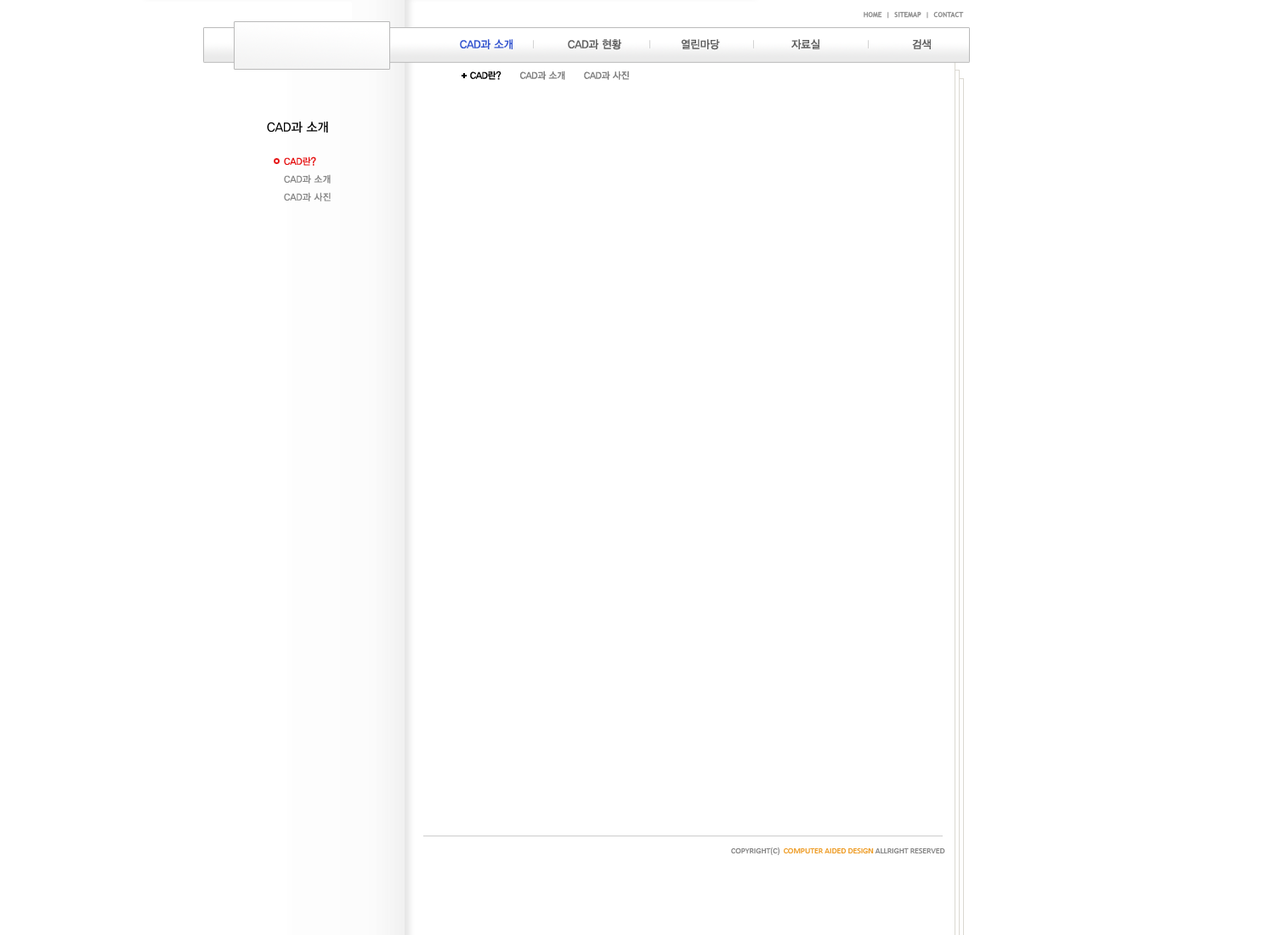
<style>
.page{position:relative;width:1275px;height:935px;background:#ffffff}
.page>*{position:absolute;margin:0}
.t1{font:6.8px "TrebuchetMS";color:#929292;text-transform:uppercase;font-weight:bold}
.t2{font:11.1px "YDIYGO130";color:#3455cf;text-transform:uppercase;scale:0.95 1}
.t3{font:11.1px "YDIYGO130";color:#606060;text-transform:uppercase;scale:0.95 1}
.t4{font:9.4px "YDIYGO130";color:#808080;text-transform:uppercase;scale:0.95 1}
.t5{font:9.4px "YDIYGO130";color:#000000;text-transform:uppercase;scale:0.95 1}
.t6{font:12.8px "YDIYGO130";color:#000000;text-transform:uppercase;scale:0.95 1}
.t7{font:9.4px/17.9px "YDIYGO130";color:#888888;text-transform:uppercase;font-weight:bold;scale:0.95 1}
.t8{font:9.4px/17.9px "YDIYGO130";color:#e50f0f;text-transform:uppercase;font-weight:bold;scale:0.95 1}
.t9{font:8.5px "Calibri";letter-spacing:-0.01em;color:#ee9d28;text-transform:uppercase}
.t10{font:8.5px "Calibri";letter-spacing:-0.01em;color:#868686;text-transform:uppercase}
</style>
<div class="page">
<p class="t1" style="left:864px;top:12px;width:100px;height:7px">home  |  sitemap  |  contact</p>
<p class="t2" style="left:460px;top:39px;width:53px;height:10px">CAD과 소개</p>
<p class="t3" style="left:568px;top:39px;width:53px;height:11px">CAD과 현황</p>
<p class="t3" style="left:681px;top:39px;width:39px;height:11px">열린마당</p>
<p class="t3" style="left:791px;top:39px;width:29px;height:10px">자료실</p>
<p class="t3" style="left:912px;top:39px;width:19px;height:10px">검색</p>
<p class="t4" style="left:470px;top:71px;width:159px;height:9px"><span class="t5">CAD란?</span>      CAD과 소개      CAD과 사진</p>
<p class="t6" style="left:267px;top:122px;width:61px;height:11px">CAD과 소개</p>
<p class="t7" style="left:284px;top:156px;width:47px;height:45px"><span class="t8">cad란?<br></span>cad과 소개<br>cad과 사진</p>
<p class="t9" style="left:731px;top:848px;width:214px;height:7px"><span class="t10">copyright(c)  </span>computer aided design<span class="t10"> allright reserved</span></p>
</div>
